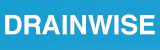
<style>
.page{position:relative;width:160px;height:50px}
.page>*{position:absolute;margin:0}
.t1{font:26.7px "Helvetica-Bold";color:#ffffff}
</style>
<div class="page">
<p class="t1" style="left:5px;top:14px;width:150px;height:21px">DRAINWISE</p>
</div>
